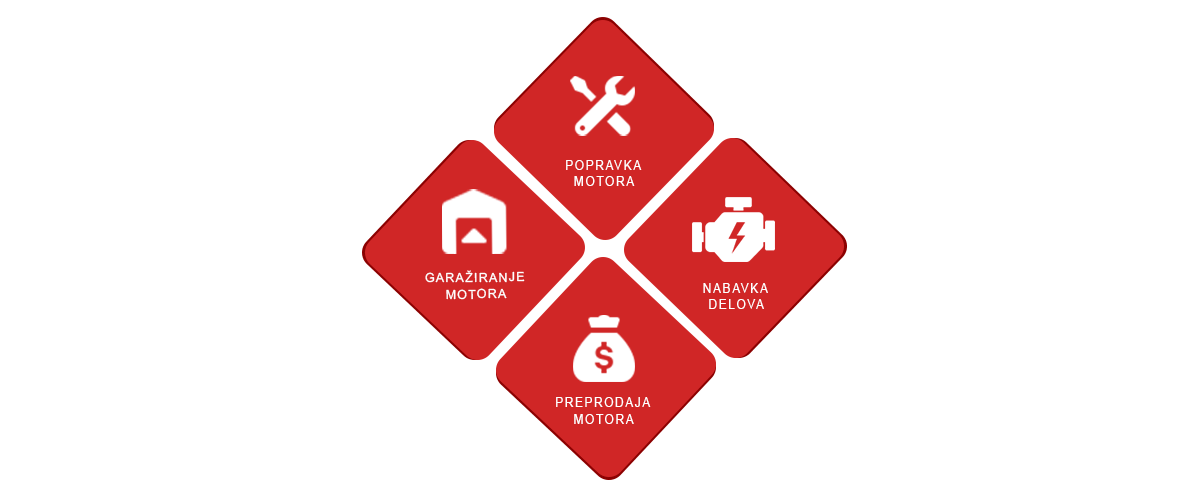
<style>
.page{position:relative;width:1200px;height:500px;background:#ffffff}
.page>*{position:absolute;margin:0}
.t1{font:12.5px "ArialMT";letter-spacing:0.1em;color:#ffffff}
.t2{font:12.6px "ArialMT";letter-spacing:0.1em;color:#ffffff}
.t3{font:12.7px "ArialMT";letter-spacing:0.1em;color:#ffffff}
</style>
<div class="page">
<p class="t1" style="left:566px;top:160px;width:76px;height:10px">POPRAVKA</p>
<p class="t1" style="left:574px;top:176px;width:61px;height:10px">MOTORA</p>
<p class="t2" style="left:425px;top:270px;width:100px;height:13px;rotate:-1deg">GARAŽIRANJE</p>
<p class="t2" style="left:446px;top:288px;width:61px;height:12px;rotate:-1deg">MOTORA</p>
<p class="t2" style="left:703px;top:283px;width:65px;height:10px">NABAVKA</p>
<p class="t2" style="left:709px;top:299px;width:55px;height:10px">DELOVA</p>
<p class="t3" style="left:556px;top:397px;width:95px;height:10px">PREPRODAJA</p>
<p class="t3" style="left:574px;top:414px;width:60px;height:10px">MOTORA</p>
</div>
